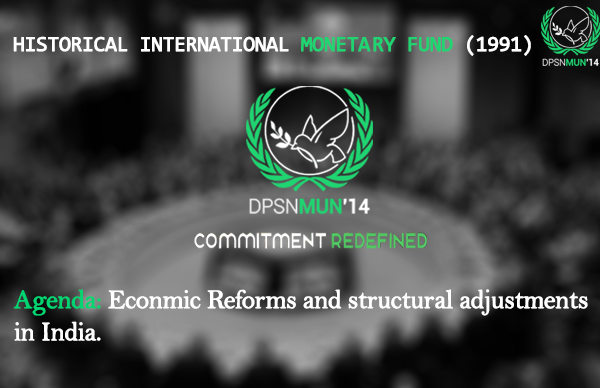
<style>
.page{position:relative;width:600px;height:388px}
.page>*{position:absolute;margin:0}
.t1{font:21.4px "Consolas";letter-spacing:-0.04em;color:#ffffff;font-weight:bold}
.t2{font:21.4px "Consolas";letter-spacing:-0.04em;color:#1fd571;font-weight:bold}
.t3{font:26.8px "BellMT";letter-spacing:-0.04em;color:#ffffff;font-weight:bold}
.t4{font:26.8px "BellMT";letter-spacing:-0.04em;color:#01d571;font-weight:bold}
</style>
<div class="page">
<p class="t1" style="left:13px;top:35px;width:518px;height:21px">HISTORICAL INTERNATIONAL <span class="t2">MONETA RY FUND</span> (1991)</p>
<p class="t3" style="left:13px;top:289px;width:575px;height:52px"><span class="t4">Agenda: </span>Econmic Reforms and structural adjustments<br>in India.</p>
</div>
